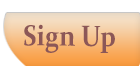
<style>
.page{position:relative;width:140px;height:66px;background:#ffffff}
.page>*{position:absolute;margin:0}
.t1{font:29.2px "Constantia-Bold";color:#8c5757;scale:0.88 1}
</style>
<div class="page">
<p class="t1" style="left:24px;top:24px;width:91px;height:29px;rotate:1deg">Sign Up</p>
</div>
